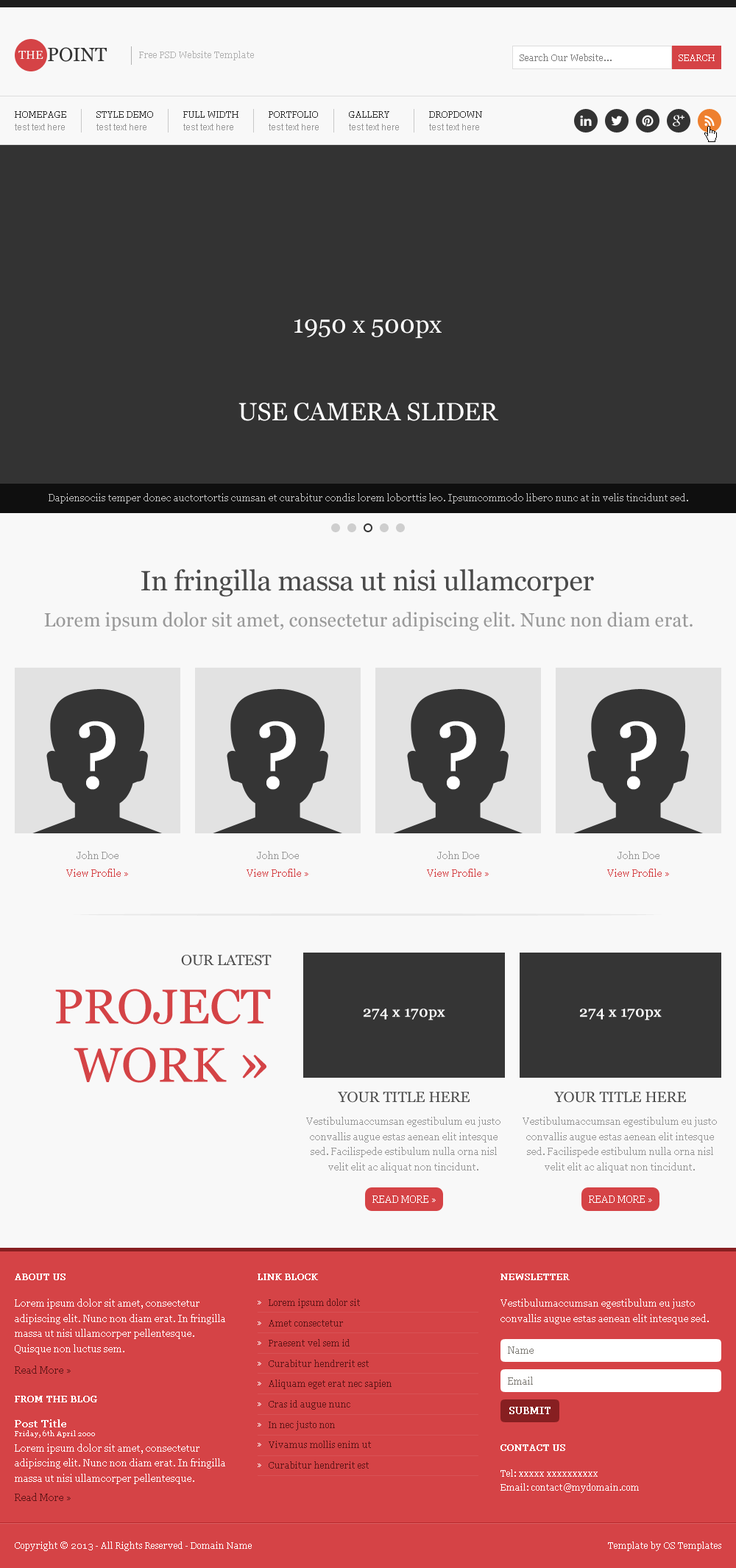
<style>
.page{position:relative;width:736px;height:1568px;background:#f8f8f8}
.page>*{position:absolute;margin:0}
.t1{font:19.1px "Georgia";color:#333333}
.t2{font:11.8px "Georgia";color:#f8f8f8}
.t3{font:8.8px "Georgia";color:#b2b2b2}
.t4{font:8.8px "Georgia";color:#7f7f7f}
.t5{font:8.8px "Georgia";color:#ffffff}
.t6{font:8.8px "Georgia";color:#333333}
.t7{font:8.8px "ArialMT";color:#999999}
.t8{font:25px "Georgia";color:#ffffff}
.t9{font:9.6px "Georgia";color:#bfbfbf}
.t10{font:28px "Georgia";color:#4a4a4a}
.t11{font:19.1px "Georgia";color:#999999}
.t12{font:94.1px "Georgia";color:#ffffff;font-weight:bold}
.t13{font:9.6px "Georgia";color:#999999}
.t14{font:9.6px "Georgia";color:#d54346}
.t15{font:48.6px/58.3px "Georgia";color:#d44346}
.t16{font:14.7px/17.7px "Georgia";color:#4a4a4a}
.t17{font:58.9px/0.1px "Georgia";color:#d44346}
.t18{font:14.7px "Georgia";color:#ffffff;font-weight:bold}
.t19{font:14.7px "Georgia";color:#4a4a4a}
.t20{font:9.6px/15.3px "Georgia";color:#999999}
.t21{font:9.6px "Georgia";color:#ffffff}
.t22{font:8.8px "Georgia";color:#ffffff;font-weight:bold}
.t23{font:9.6px/15.3px "Georgia";color:#ffffff}
.t24{font:8.8px/20.3px "Georgia";color:#ffffff}
.t25{font:8.8px/20.3px "Georgia";color:#631618}
.t26{font:9.6px "Georgia";color:#807d77}
.t27{font:9.6px "Georgia";color:#631618}
.t28{font:9.6px "Georgia";color:#ffffff;font-weight:bold}
.t29{font:10.3px/12.4px "Georgia";color:#ffffff;font-weight:bold}
.t30{font:7.4px/8.8px "Georgia";color:#ffffff}
.t31{font:8.8px/14.1px "Georgia";color:#ffffff}
</style>
<div class="page">
<p class="t1" style="left:18px;top:47px;width:89px;height:15px"><span class="t2">THE </span>POINT</p>
<p class="t3" style="left:139px;top:51px;width:115px;height:9px">Free PSD Website Template</p>
<p class="t4" style="left:520px;top:54px;width:92px;height:7px">Search Our Website...</p>
<p class="t5" style="left:679px;top:54px;width:36px;height:7px">SEARCH</p>
<p class="t6" style="left:15px;top:111px;width:51px;height:7px">HOMEPAGE</p>
<p class="t6" style="left:96px;top:111px;width:57px;height:7px">STYLE DEMO</p>
<p class="t6" style="left:183px;top:111px;width:56px;height:7px">FULL WIDTH</p>
<p class="t6" style="left:269px;top:111px;width:49px;height:7px">PORTFOLIO</p>
<p class="t6" style="left:349px;top:111px;width:40px;height:7px">GALLERY</p>
<p class="t6" style="left:429px;top:111px;width:53px;height:7px">DROPDOWN</p>
<p class="t7" style="left:15px;top:124px;width:50px;height:6px">test text here</p>
<p class="t7" style="left:96px;top:124px;width:50px;height:6px">test text here</p>
<p class="t7" style="left:183px;top:124px;width:50px;height:6px">test text here</p>
<p class="t7" style="left:269px;top:124px;width:50px;height:6px">test text here</p>
<p class="t7" style="left:349px;top:124px;width:50px;height:6px">test text here</p>
<p class="t7" style="left:429px;top:124px;width:50px;height:6px">test text here</p>
<p class="t8" style="left:294px;top:319px;width:148px;height:20px">1950 x 500px</p>
<p class="t8" style="left:239px;top:403px;width:259px;height:18px">USE CAMERA SLIDER</p>
<p class="t9" style="left:49px;top:493px;width:639px;height:11px">Dapiensociis temper donec auctortortis cumsan et curabitur condis lorem loborttis leo. Ipsumcommodo libero nunc at in velis tincidunt sed.</p>
<p class="t10" style="left:141px;top:569px;width:453px;height:28px">In fringilla massa ut nisi ullamcorper</p>
<p class="t11" style="left:44px;top:612px;width:649px;height:19px">Lorem ipsum dolor sit amet, consectetur adipiscing elit. Nunc non diam erat.</p>
<p class="t12" style="left:79px;top:721px;width:37px;height:69px">?</p>
<p class="t12" style="left:259px;top:721px;width:37px;height:69px">?</p>
<p class="t12" style="left:439px;top:721px;width:37px;height:69px">?</p>
<p class="t12" style="left:620px;top:721px;width:37px;height:69px">?</p>
<p class="t13" style="left:77px;top:851px;width:42px;height:8px">John Doe</p>
<p class="t13" style="left:257px;top:851px;width:42px;height:8px">John Doe</p>
<p class="t13" style="left:437px;top:851px;width:42px;height:8px">John Doe</p>
<p class="t13" style="left:618px;top:851px;width:42px;height:8px">John Doe</p>
<p class="t14" style="left:66px;top:869px;width:62px;height:8px">View Profile »</p>
<p class="t14" style="left:247px;top:869px;width:61px;height:8px">View Profile »</p>
<p class="t14" style="left:427px;top:869px;width:62px;height:8px">View Profile »</p>
<p class="t14" style="left:607px;top:869px;width:62px;height:8px">View Profile »</p>
<p class="t15" style="left:55px;top:955px;width:217px;height:128px;text-align:right"><span class="t16">OUR LATEST<br></span>PROJECT<br>WORK <span class="t17">»</span></p>
<p class="t18" style="left:364px;top:1009px;width:81px;height:11px">274 x 170px</p>
<p class="t18" style="left:580px;top:1009px;width:82px;height:11px">274 x 170px</p>
<p class="t19" style="left:338px;top:1092px;width:132px;height:11px">YOUR TITLE HERE</p>
<p class="t19" style="left:554px;top:1092px;width:132px;height:11px">YOUR TITLE HERE</p>
<p class="t20" style="left:306px;top:1117px;width:195px;height:56px;text-align:center">Vestibulumaccumsan egestibulum eu justo convallis augue estas aenean elit intesque sed. Facilispede estibulum nulla orna nisl velit elit ac aliquat non tincidunt.</p>
<p class="t20" style="left:523px;top:1117px;width:194px;height:56px;text-align:center">Vestibulumaccumsan egestibulum eu justo convallis augue estas aenean elit intesque sed. Facilispede estibulum nulla orna nisl velit elit ac aliquat non tincidunt.</p>
<p class="t21" style="left:372px;top:1196px;width:64px;height:7px">READ MORE »</p>
<p class="t21" style="left:589px;top:1196px;width:63px;height:7px">READ MORE »</p>
<p class="t22" style="left:15px;top:1274px;width:51px;height:6px">ABOUT US</p>
<p class="t22" style="left:258px;top:1274px;width:60px;height:6px">LINK BLOCK</p>
<p class="t22" style="left:501px;top:1274px;width:69px;height:6px">NEWSLETTER</p>
<p class="t23" style="left:15px;top:1299px;width:210px;height:56px">Lorem ipsum dolor sit amet, consectetur adipiscing elit. Nunc non diam erat. In fringilla massa ut nisi ullamcorper pellentesque. Quisque non luctus sem.</p>
<p class="t24" style="left:258px;top:1301px;width:3px;height:166px">»<br>»<br>»<br>»<br>»<br>»<br>»<br>»<br>»</p>
<p class="t25" style="left:269px;top:1299px;width:123px;height:170px">Lorem ipsum dolor sit<br>Amet consectetur<br>Praesent vel sem id<br>Curabitur hendrerit est<br>Aliquam eget erat nec sapien<br>Cras id augue nunc<br>In nec justo non<br>Vivamus mollis enim ut<br>Curabitur hendrerit est</p>
<p class="t23" style="left:501px;top:1299px;width:208px;height:25px">Vestibulumaccumsan egestibulum eu justo convallis augue estas aenean elit intesque sed.</p>
<p class="t26" style="left:508px;top:1346px;width:26px;height:8px">Name</p>
<p class="t27" style="left:15px;top:1366px;width:56px;height:8px">Read More »</p>
<p class="t26" style="left:508px;top:1377px;width:25px;height:8px">Email</p>
<p class="t22" style="left:15px;top:1396px;width:82px;height:6px">FROM THE BLOG</p>
<p class="t28" style="left:509px;top:1407px;width:42px;height:7px">SUBMIT</p>
<p class="t23" style="left:15px;top:1419px;width:210px;height:65px"><span class="t29">Post Title<br></span><span class="t30">Friday, 6th April 2000<br></span>Lorem ipsum dolor sit amet, consectetur adipiscing elit. Nunc non diam erat. In fringilla massa ut nisi ullamcorper pellentesque.</p>
<p class="t22" style="left:501px;top:1444px;width:64px;height:7px">CONTACT US</p>
<p class="t31" style="left:501px;top:1469px;width:138px;height:24px">Tel: xxxxx xxxxxxxxxx<br>Email: contact@mydomain.com</p>
<p class="t27" style="left:15px;top:1493px;width:56px;height:8px">Read More »</p>
<p class="t5" style="left:15px;top:1541px;width:237px;height:10px">Copyright © 2013 - All Rights Reserved - Domain Name</p>
<p class="t5" style="left:608px;top:1541px;width:113px;height:10px">Template by OS Templates</p>
</div>
